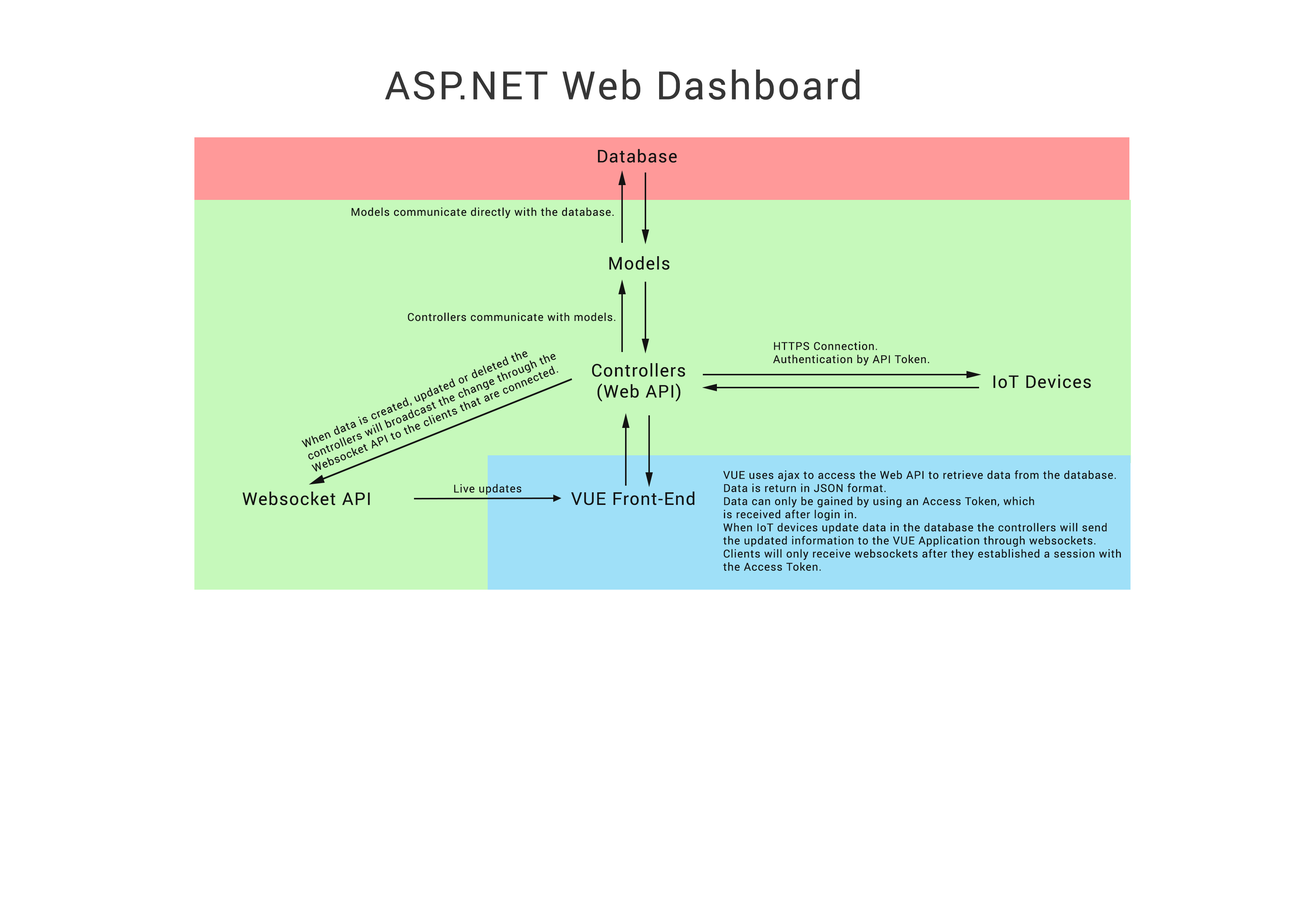
<style>
.page{position:relative;width:1299px;height:918px;background:#ffffff}
.page>*{position:absolute;margin:0}
.t1{font:39.1px "Roboto-Regular";letter-spacing:0.05em;color:#363636}
.t2{font:17.5px "Roboto-Regular";letter-spacing:0.05em;color:#131313}
.t3{font:10.9px "Roboto-Regular";letter-spacing:0.05em;color:#131313}
</style>
<div class="page">
<p class="t1" style="left:385px;top:69px;width:474px;height:31px">ASP.NET Web Dashboard</p>
<p class="t2" style="left:598px;top:149px;width:79px;height:14px">Database</p>
<p class="t3" style="left:351px;top:207px;width:262px;height:11px">Models communicate directly with the database.</p>
<p class="t2" style="left:609px;top:256px;width:60px;height:14px">Models</p>
<p class="t3" style="left:408px;top:312px;width:207px;height:9px">Controllers communicate with models.</p>
<p class="t3" style="left:773px;top:341px;width:156px;height:25px">HTTPS Connection.<br>Authentication by API Token.</p>
<p class="t3" style="left:301px;top:351px;width:257px;height:121px;rotate:-22deg">When data is created, updated or deleted the <br>controllers will broadcast the change through the<br>Websocket API to the clients that are connected.</p>
<p class="t2" style="left:592px;top:363px;width:93px;height:39px">Controllers<br> (Web API)</p>
<p class="t2" style="left:993px;top:374px;width:98px;height:14px">IoT Devices</p>
<p class="t3" style="left:723px;top:470px;width:398px;height:101px">VUE uses ajax to access the Web API to retrieve data from the database.<br>Data is return in JSON format.<br>Data can only be gained by using an Access Token, which<br>is received after login in.<br>When IoT devices update data in the database the controllers will send<br>the updated information to the VUE Application through websockets.<br>Clients will only receive websockets after they established a session with<br>the Access Token.</p>
<p class="t3" style="left:454px;top:484px;width:67px;height:11px">Live updates</p>
<p class="t2" style="left:242px;top:492px;width:128px;height:13px">Websocket API</p>
<p class="t2" style="left:571px;top:491px;width:124px;height:14px">VUE Front-End</p>
</div>
